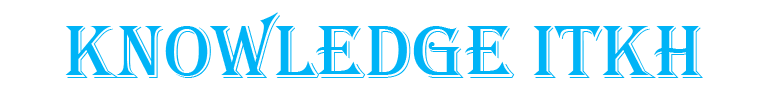
<style>
.page{position:relative;width:770px;height:105px;background:#ffffff}
.page>*{position:absolute;margin:0}
.t1{font:77.8px "Algerian";color:#00b4f7}
</style>
<div class="page">
<p class="t1" style="left:65px;top:12px;width:638px;height:66px">Knowledge ITKH</p>
</div>
